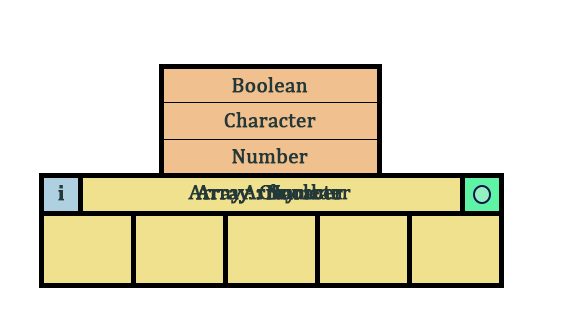
<style>
.page{position:relative;width:565px;height:331px;background:#ffffff}
.page>*{position:absolute;margin:0}
.t1{font:20.8px "Cambria";color:#233939;font-weight:bold}
.t2{font:20.8px "Cambria-Bold";color:#233939;font-weight:bold}
</style>
<div class="page">
<p class="t1" style="left:232px;top:77px;width:76px;height:16px">Boolean</p>
<p class="t1" style="left:224px;top:112px;width:92px;height:16px">Character</p>
<p class="t1" style="left:232px;top:148px;width:76px;height:16px">Number</p>
<p class="t2" style="left:58px;top:185px;width:6px;height:16px">i</p>
<p class="t1" style="left:188px;top:184px;width:163px;height:20px">Array : Character</p>
<p class="t1" style="left:196px;top:184px;width:147px;height:20px">Array : Number</p>
<p class="t1" style="left:196px;top:184px;width:147px;height:20px">Array : Boolean</p>
<p class="t1" style="left:242px;top:185px;width:55px;height:19px">Array</p>
</div>
